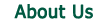
<style>
.page{position:relative;width:107px;height:25px;background:#ffffff}
.page>*{position:absolute;margin:0}
.t1{font:18px "Tahoma";letter-spacing:0.02em;color:#005941;font-weight:bold}
</style>
<div class="page">
<p class="t1" style="left:14px;top:4px;width:79px;height:15px">About Us</p>
</div>
